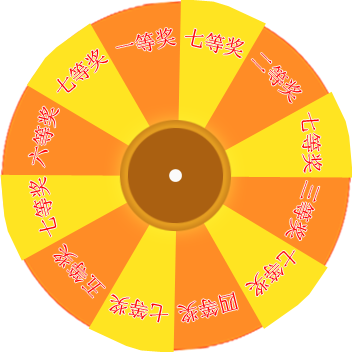
<style>
.page{position:relative;width:352px;height:352px;background:#ffe422}
.page>*{position:absolute;margin:0}
.t1{font:20.5px "SimSun";color:#ff0000}
</style>
<div class="page">
<p class="t1" style="left:116px;top:28px;width:60px;height:24px;rotate:-12deg">一等奖</p>
<p class="t1" style="left:185px;top:28px;width:59px;height:30px;rotate:13deg">七等奖</p>
<p class="t1" style="left:57px;top:49px;width:52px;height:44px;rotate:-40deg">七等奖</p>
<p class="t1" style="left:251px;top:53px;width:51px;height:50px;rotate:46deg">二等奖</p>
<p class="t1" style="left:28px;top:106px;width:31px;height:62px;rotate:-76deg">六等奖</p>
<p class="t1" style="left:301px;top:112px;width:21px;height:61px;rotate:86deg">七等奖</p>
<p class="t1" style="left:29px;top:176px;width:28px;height:61px;rotate:-103deg">七等奖</p>
<p class="t1" style="left:285px;top:181px;width:35px;height:60px;rotate:110deg">三等奖</p>
<p class="t1" style="left:53px;top:244px;width:52px;height:54px;rotate:-134deg">五等奖</p>
<p class="t1" style="left:245px;top:250px;width:51px;height:46px;rotate:136deg">七等奖</p>
<p class="t1" style="left:109px;top:294px;width:60px;height:29px;rotate:-168deg">七等奖</p>
<p class="t1" style="left:177px;top:292px;width:61px;height:31px;rotate:166deg">四等奖</p>
</div>
